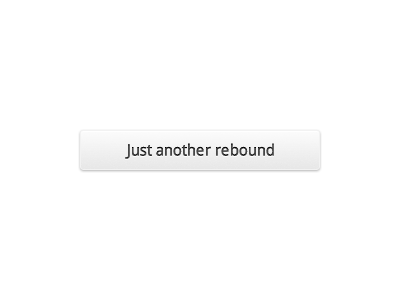
<style>
.page{position:relative;width:400px;height:300px;background:#ffffff}
.page>*{position:absolute;margin:0}
.t1{font:16px "DroidSans";color:#474747}
</style>
<div class="page">
<p class="t1" style="left:125px;top:143px;width:149px;height:16px">Just another rebound</p>
</div>
